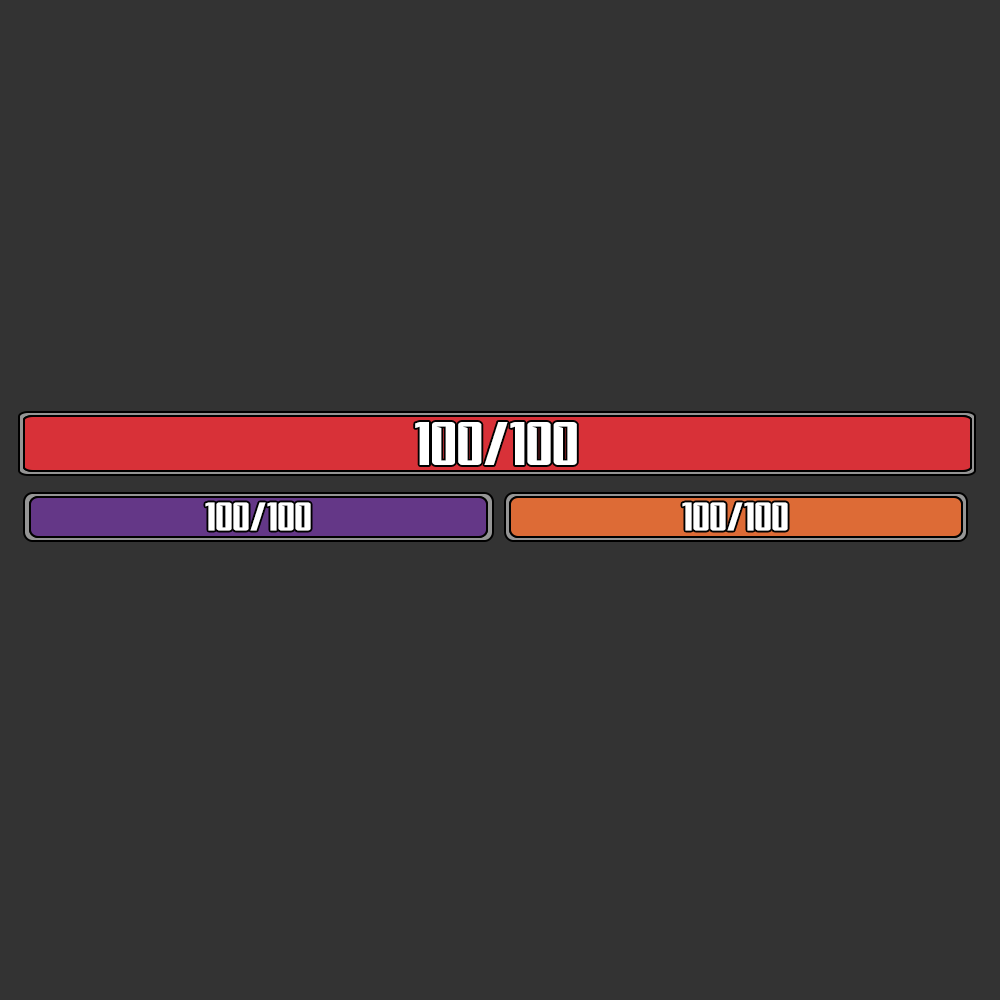
<style>
.page{position:relative;width:1000px;height:1000px;background:#333333}
.page>*{position:absolute;margin:0}
.t1{font:63px "Subspace";color:#ffffff}
.t2{font:41px "Subspace";color:#ffffff}
</style>
<div class="page">
<p class="t1" style="left:415px;top:422px;width:162px;height:43px">100/100</p>
<p class="t2" style="left:205px;top:502px;width:106px;height:29px">100/100</p>
<p class="t2" style="left:682px;top:502px;width:106px;height:29px">100/100</p>
</div>
